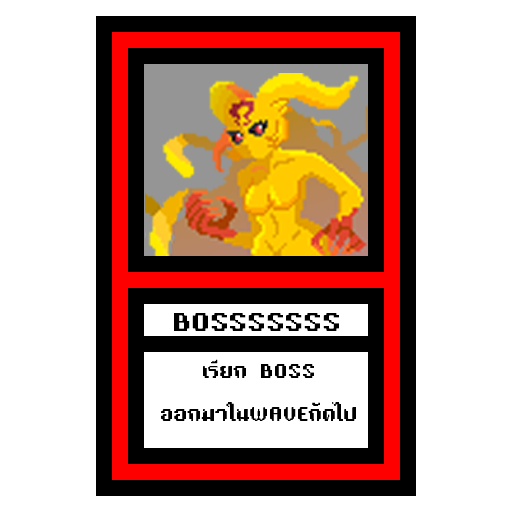
<style>
.page{position:relative;width:512px;height:512px;background:#ffffff}
.page>*{position:absolute;margin:0}
.t1{font:24px "TA16BIT-Regular";color:#000000}
.t2{font:18px "TA16BIT-Regular";color:#000000}
</style>
<div class="page">
<p class="t1" style="left:174px;top:313px;width:165px;height:18px">BOSSSSSSS</p>
<p class="t2" style="left:161px;top:359px;width:195px;height:62px;text-align:center">เรียก BOSS<br><br>ออกมาในWAVEถัดไป</p>
</div>
